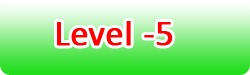
<style>
.page{position:relative;width:250px;height:75px}
.page>*{position:absolute;margin:0}
.t1{font:36px "Calibri";color:#ff0000;font-weight:bold}
</style>
<div class="page">
<p class="t1" style="left:57px;top:21px;width:116px;height:25px">Level -5</p>
</div>
